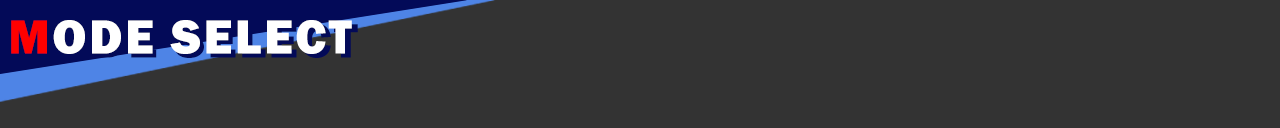
<style>
.page{position:relative;width:1280px;height:128px;background:#333333}
.page>*{position:absolute;margin:0}
.t1{font:49.4px "FranklinGothic-Heavy";letter-spacing:0.05em;color:#ffffff}
.t2{font:49.4px "FranklinGothic-Heavy";letter-spacing:0.05em;color:#ff0000}
</style>
<div class="page">
<p class="t1" style="left:11px;top:20px;width:341px;height:34px"><span class="t2">M</span>ODE SELECT</p>
</div>
